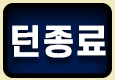
<style>
.page{position:relative;width:115px;height:80px}
.page>*{position:absolute;margin:0}
.t1{font:33.7px "S-CoreDream-6Bold";color:#ffffff;font-weight:bold}
</style>
<div class="page">
<p class="t1" style="left:12px;top:25px;width:94px;height:33px">턴종료</p>
</div>
